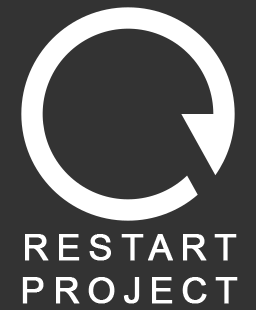
<style>
.page{position:relative;width:256px;height:310px;background:#333333}
.page>*{position:absolute;margin:0}
.t1{font:36px "ArialMT";letter-spacing:0.2em;color:#ffffff;font-weight:bold}
</style>
<div class="page">
<p class="t1" style="left:22px;top:234px;width:216px;height:70px;text-align:center">RESTART<br>PROJECT</p>
</div>
